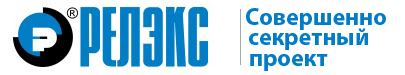
<style>
.page{position:relative;width:405px;height:75px;background:#ffffff}
.page>*{position:absolute;margin:0}
.t1{font:24px "MyriadPro-Bold";color:#017cc9}
</style>
<div class="page">
<p class="t1" style="left:246px;top:8px;width:140px;height:22px">Совершенно</p>
<p class="t1" style="left:249px;top:28px;width:119px;height:22px">секретный</p>
<p class="t1" style="left:250px;top:54px;width:78px;height:17px">проект</p>
</div>
